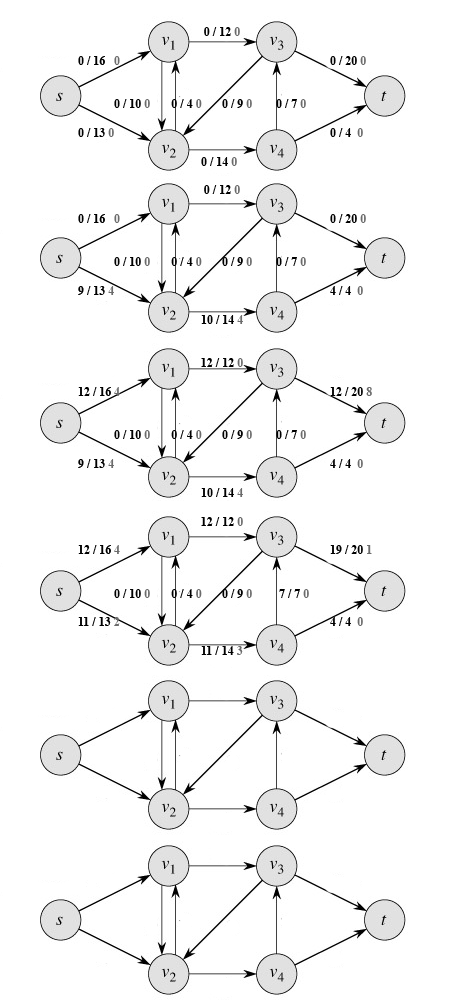
<style>
.page{position:relative;width:464px;height:1000px;background:#ffffff}
.page>*{position:absolute;margin:0}
.t1{font:12px "TimesNewRomanPS-BoldMT";color:#000000}
.t2{font:12px "TimesNewRomanPS-BoldMT";color:#6b6b6b}
</style>
<div class="page">
<p class="t1" style="left:78px;top:27px;width:294px;height:628px;text-align:center">0 / 12 <span class="t2">0<br></span><br>  0 / 16 <span class="t2">0</span>      0 / 20 <span class="t2">0<br></span><br><br>   0 / 10 <span class="t2">0</span>       0 / 4 <span class="t2">0</span> 0 / 9 <span class="t2">0</span>       0 / 7 <span class="t2">0<br></span><br>  0 / 13 <span class="t2">0</span>      0 / 4  <span class="t2">0<br></span><br>          0 / 14 <span class="t2">0<br></span><br>            0 / 12 <span class="t2">0<br></span><br>  0 / 16 <span class="t2">0</span>      0 / 20 <span class="t2">0<br></span><br><br>   0 / 10 <span class="t2">0</span>       0 / 4 <span class="t2">0</span> 0 / 9 <span class="t2">0</span>       0 / 7 <span class="t2">0<br></span><br>  9 / 13 <span class="t2">4</span>      4 / 4  <span class="t2">0<br></span><br>          10 / 14 <span class="t2">4<br><br><br></span>            12 / 12 <span class="t2">0<br></span><br>  12 / 16 <span class="t2">4</span>      12 / 20 <span class="t2">8<br></span><br><br>   0 / 10 <span class="t2">0</span>       0 / 4 <span class="t2">0</span> 0 / 9 <span class="t2">0</span>       0 / 7 <span class="t2">0<br></span><br>  9 / 13 <span class="t2">4</span>      4 / 4  <span class="t2">0<br></span><br>          10 / 14 <span class="t2">4<br><br></span>            12 / 12 <span class="t2">0<br></span><br>  12 / 16 <span class="t2">4</span>      19 / 20 <span class="t2">1<br></span><br><br>   0 / 10 <span class="t2">0</span>       0 / 4 <span class="t2">0</span> 0 / 9 <span class="t2">0</span>        7 / 7 <span class="t2">0<br></span><br>  11 / 13 <span class="t2">2</span>      4 / 4  <span class="t2">0<br></span><br>          11 / 14 <span class="t2">3</span></p>
</div>
